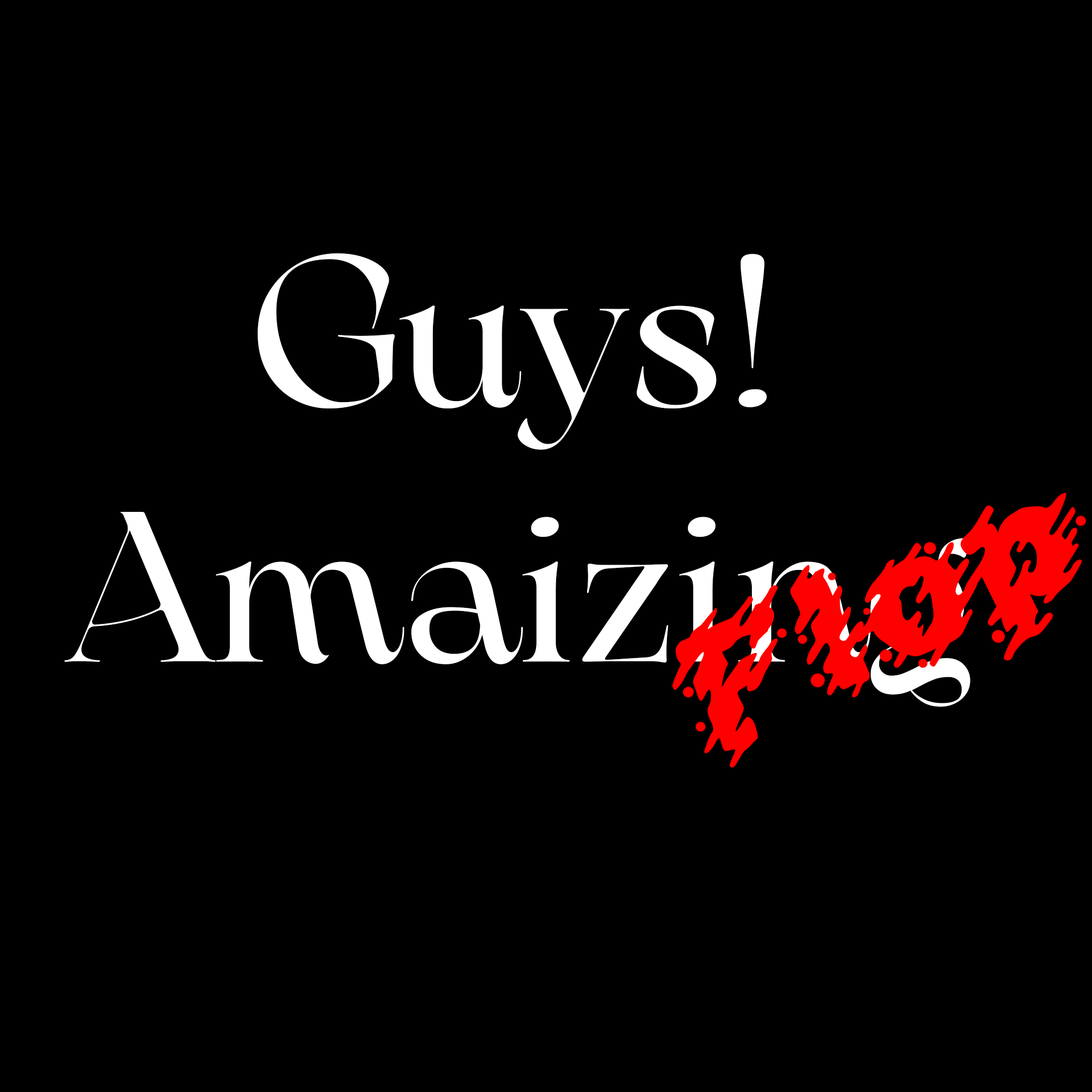
<style>
.page{position:relative;width:1092px;height:1092px;background:#000000}
.page>*{position:absolute;margin:0}
.t1{font:213.3px "ArsenicaTrial-Regular";color:#ffffff}
.t2{font:208.9px "SPLATRegular";color:#ff0000}
</style>
<div class="page">
<p class="t1" style="left:65px;top:253px;width:905px;height:454px;text-align:center">Guys!<br>Amaizing</p>
<p class="t2" style="left:672px;top:493px;width:414px;height:275px;rotate:-25deg">Flop</p>
</div>
